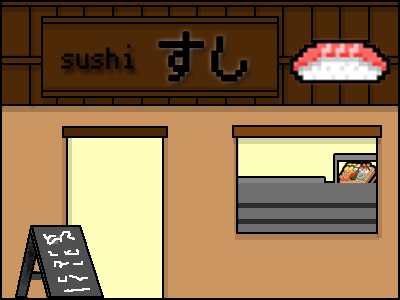
<style>
.page{position:relative;width:400px;height:300px;background:#cc9662}
.page>*{position:absolute;margin:0}
.t1{font:48px "PixelMplus10-Regular";color:#000000}
.t2{font:30px "PixelMplus10-Regular";color:#000000}
</style>
<div class="page">
<p class="t1" style="left:159px;top:32px;width:88px;height:49px">すし</p>
<p class="t2" style="left:61px;top:44px;width:73px;height:25px">sushi</p>
</div>
